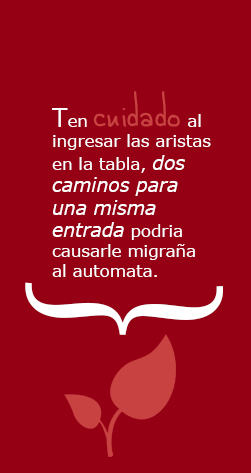
<style>
.page{position:relative;width:251px;height:473px;background:#960014}
.page>*{position:absolute;margin:0}
.t1{font:16.7px "Verdana";color:#ffffff}
.t2{font:25px "Verdana";color:#ffffff}
.t3{font:58.3px "alphabetizedcassettetapes";color:#c84242}
.t4{font:18.8px "Verdana-Italic";color:#ffffff}
.t5{font:241.7px "Gabriola";color:#ffffff}
</style>
<div class="page">
<p class="t1" style="left:52px;top:91px;width:159px;height:186px"><span class="t2">T</span>en <span class="t3">cuidado</span> al<br>ingresar las aristas<br>en la tabla, <span class="t4">dos <br>caminos para<br>una misma<br>entrada</span> podria <br>causarle migraña<br>al automata.</p>
<p class="t5" style="left:25px;top:282px;width:198px;height:53px;rotate:-90deg">{</p>
</div>
